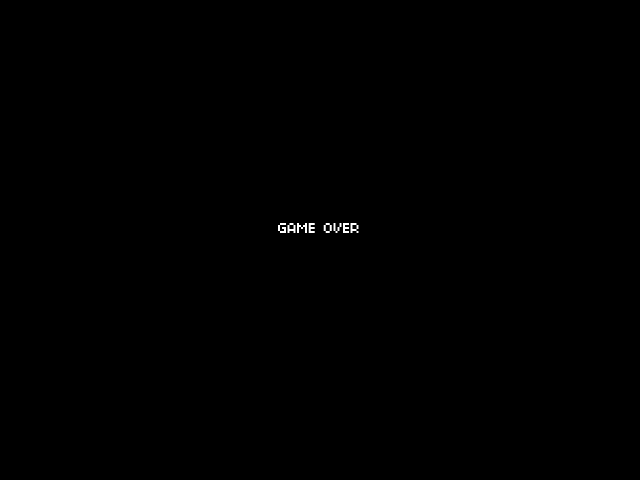
<style>
.page{position:relative;width:640px;height:480px;background:#000000}
.page>*{position:absolute;margin:0}
.t1{font:16px "04b03";letter-spacing:-0.025em;color:#ffffff;text-transform:uppercase}
</style>
<div class="page">
<p class="t1" style="left:278px;top:223px;width:81px;height:10px">Game Over</p>
</div>
